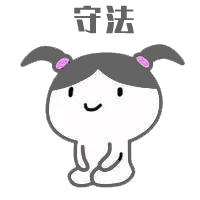
<style>
.page{position:relative;width:200px;height:200px;background:#ffffff}
.page>*{position:absolute;margin:0}
.t1{font:30px "AliHYAiHei";letter-spacing:0.1em;color:#656464}
</style>
<div class="page">
<p class="t1" style="left:74px;top:5px;width:60px;height:29px">守法</p>
</div>
